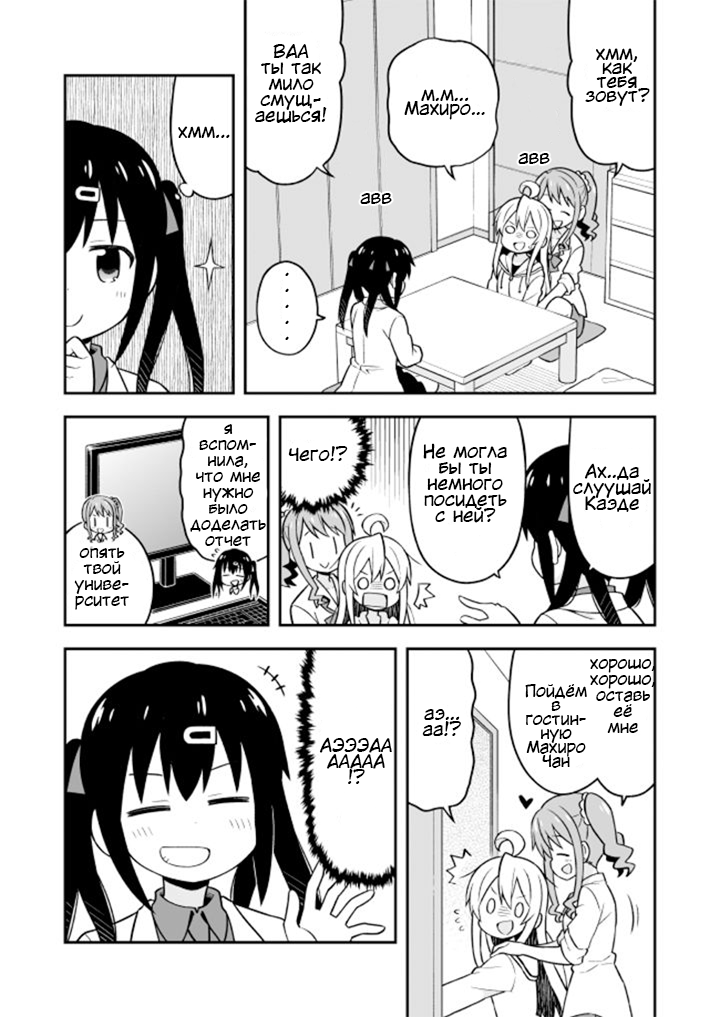
<style>
.page{position:relative;width:720px;height:1017px;background:#ffffff}
.page>*{position:absolute;margin:0}
.t1{font:18px/16px "KuraiVoice2";color:#000000}
.t2{font:18px/14px "KuraiVoice2";color:#000000}
.t3{font:18px "KuraiVoice2";color:#000000}
.t4{font:16px/16px "KuraiVoice2";color:#000000}
.t5{font:16px/14px "KuraiVoice2";color:#000000}
</style>
<div class="page">
<p class="t1" style="left:255px;top:44px;width:72px;height:79px;text-align:center">ВАА<br>ты так<br>мило<br>смущ-<br>аешься!</p>
<p class="t2" style="left:585px;top:48px;width:65px;height:58px;text-align:center">хмм,<br>как<br>тебя<br>зовут?</p>
<p class="t2" style="left:404px;top:89px;width:81px;height:31px;text-align:center">м.м...<br>Махиро…</p>
<p class="t3" style="left:178px;top:126px;width:52px;height:12px">хмм...</p>
<p class="t3" style="left:518px;top:153px;width:32px;height:11px">авв</p>
<p class="t3" style="left:360px;top:193px;width:32px;height:11px">авв</p>
<p class="t1" style="left:285px;top:272px;width:4px;height:68px;text-align:center">.<br>.<br>.<br>.<br>.</p>
<p class="t4" style="left:190px;top:424px;width:76px;height:122px;text-align:center">я<br>вспом-<br>нила,<br>что мне<br>нужно<br>было<br>доделать<br>отчет</p>
<p class="t3" style="left:288px;top:446px;width:60px;height:15px">Чего!?</p>
<p class="t1" style="left:423px;top:443px;width:84px;height:80px;text-align:center">Не могла<br>бы ты<br>немного<br>посидеть<br>с ней?</p>
<p class="t1" style="left:573px;top:463px;width:78px;height:49px;text-align:center">Ах..да<br>слуушай<br>Каэде</p>
<p class="t4" style="left:74px;top:547px;width:55px;height:63px;text-align:center">опять<br>твой<br>униве-<br>рситет</p>
<p class="t4" style="left:590px;top:659px;width:65px;height:74px;text-align:center">хорошо,<br>хорошо,<br>оставь<br>её<br>мне</p>
<p class="t5" style="left:525px;top:684px;width:62px;height:84px;text-align:center">Пойдём<br>в<br>гостин-<br>ную<br>Махиро<br>Чан</p>
<p class="t1" style="left:422px;top:709px;width:39px;height:27px;text-align:center">аэ...<br>аа!?</p>
<p class="t1" style="left:319px;top:737px;width:73px;height:47px;text-align:center">АЭЭЭАА<br>ААААА<br>!?</p>
</div>
